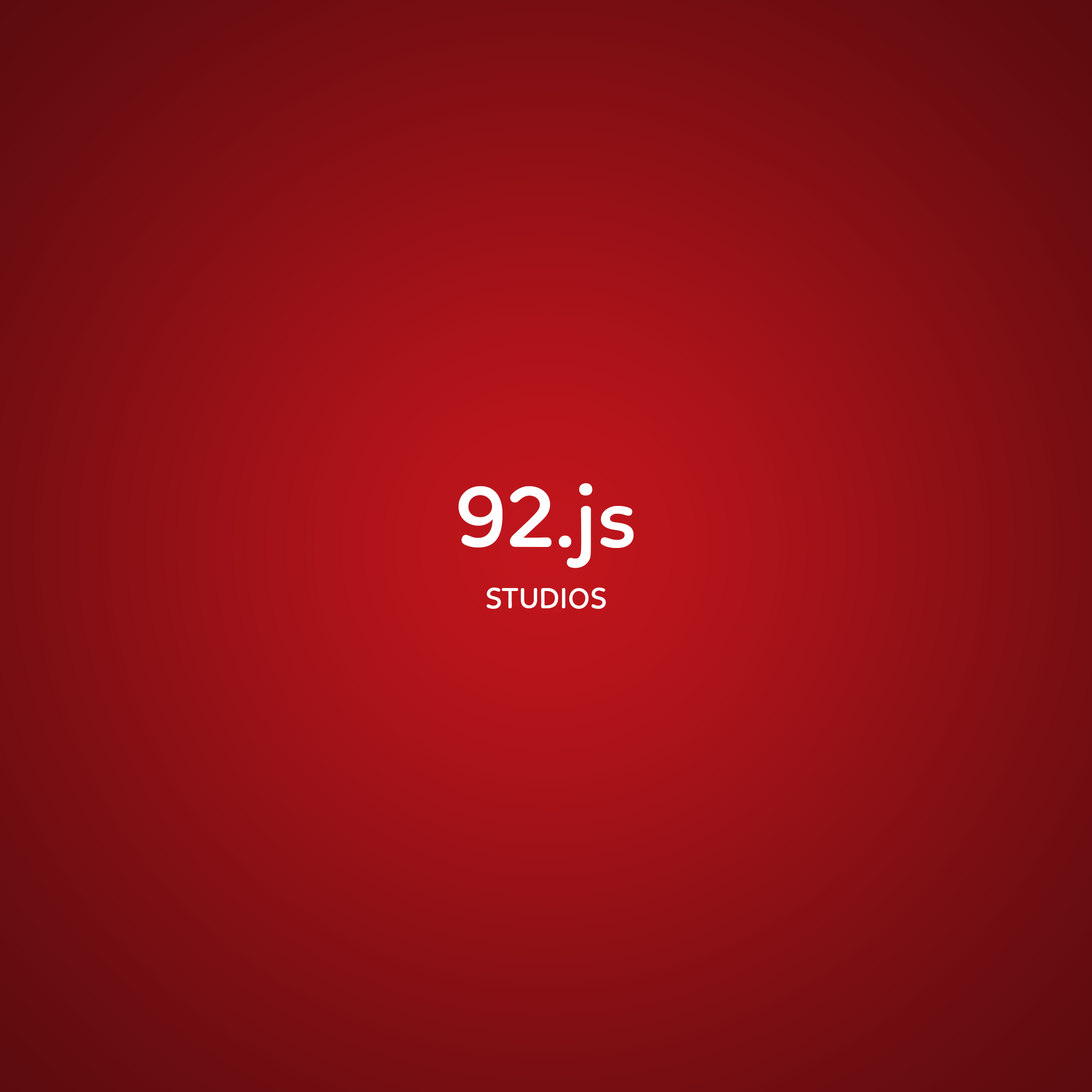
<style>
.page{position:relative;width:1092px;height:1092px}
.page>*{position:absolute;margin:0}
.t1{font:29.7px/61.3px "Linotte-SemiBold";color:#ffffff}
.t2{font:89px/61.3px "Linotte-SemiBold";color:#ffffff}
</style>
<div class="page">
<p class="t1" style="left:458px;top:483px;width:176px;height:126px;text-align:center"><span class="t2">92.js<br></span>STUDIOS</p>
</div>
